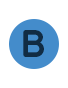
<style>
.page{position:relative;width:68px;height:88px;background:#ffffff}
.page>*{position:absolute;margin:0}
.t1{font:40px "PollyRounded-Bold";color:#112c44}
</style>
<div class="page">
<p class="t1" style="left:23px;top:30px;width:21px;height:27px">B</p>
</div>
